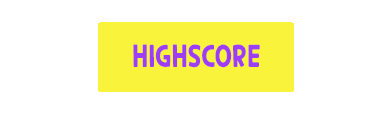
<style>
.page{position:relative;width:391px;height:113px;background:#ffffff}
.page>*{position:absolute;margin:0}
.t1{font:30px "CookieRun-Bold";color:#9d3ef6;scale:0.8 1}
</style>
<div class="page">
<p class="t1" style="left:133px;top:44px;width:127px;height:24px">HIGHSCORE</p>
</div>
